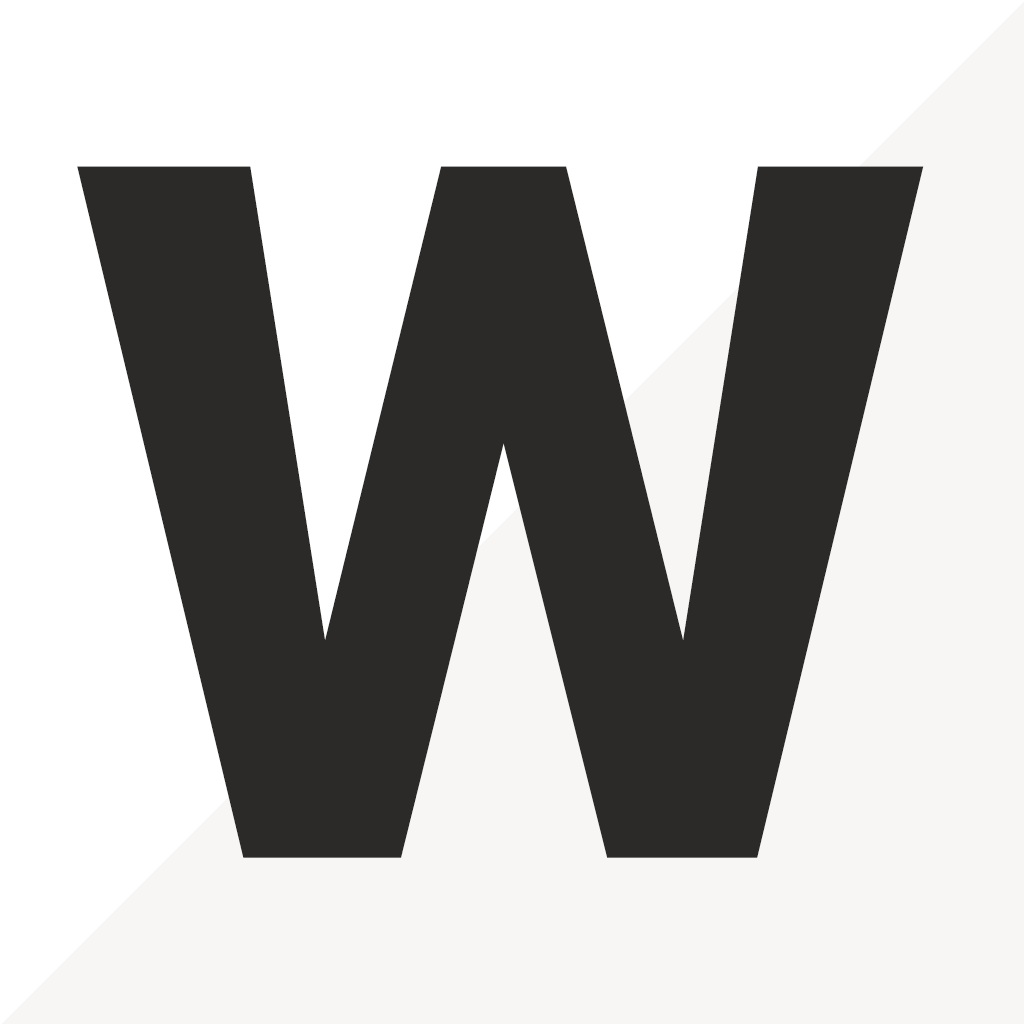
<style>
.page{position:relative;width:1024px;height:1024px;background:#ffffff}
.page>*{position:absolute;margin:0}
.t1{font:960px "Industry-Black";color:#2b2a28;text-transform:uppercase}
</style>
<div class="page">
<p class="t1" style="left:77px;top:166px;width:847px;height:692px">W</p>
</div>
